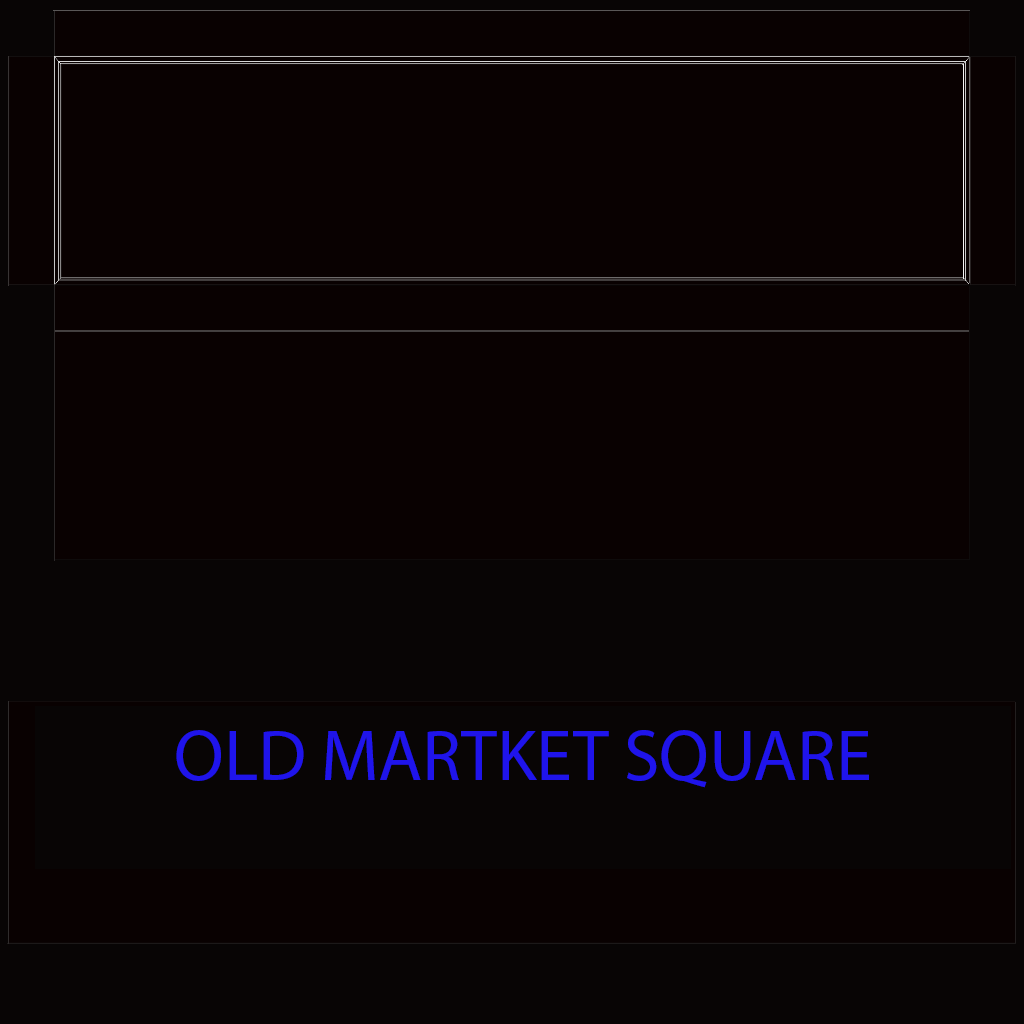
<style>
.page{position:relative;width:1024px;height:1024px;background:#090101}
.page>*{position:absolute;margin:0}
.t1{font:72px "MyriadPro-Regular";color:#1f14eb}
</style>
<div class="page">
<p class="t1" style="left:176px;top:730px;width:693px;height:58px">OLD MARTKET SQUARE</p>
</div>
